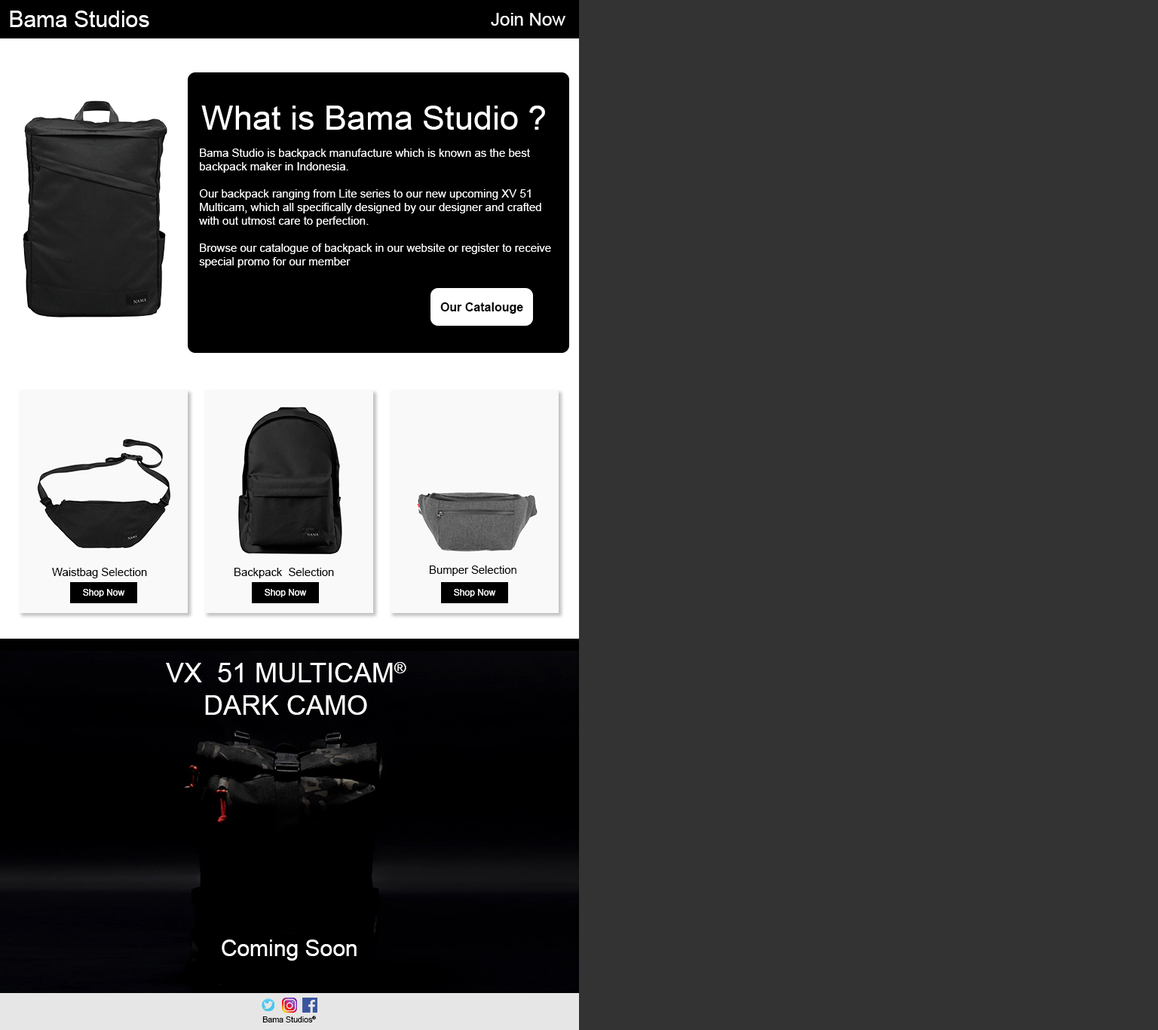
<style>
.page{position:relative;width:1158px;height:1030px;background:#333333}
.page>*{position:absolute;margin:0}
.t1{font:22.6px "ArialMT";color:#ffffff}
.t2{font:18.1px "ArialMT";color:#ffffff}
.t3{font:11.3px "ArialMT";color:#ffffff}
.t4{font:33.9px "ArialMT";color:#ffffff}
.t5{font:12.1px "Arial-BoldMT";color:#000000}
.t6{font:11.2px "ArialMT";color:#000000}
.t7{font:9px "ArialMT";color:#ffffff}
.t8{font:27.1px "ArialMT";color:#ffffff}
.t9{font:8px "ArialMT";color:#000000}
</style>
<div class="page">
<p class="t1" style="left:10px;top:11px;width:139px;height:16px">Bama Studios</p>
<p class="t2" style="left:491px;top:13px;width:74px;height:13px">Join Now</p>
<p class="t3" style="left:199px;top:106px;width:352px;height:162px"><span class="t4">What is Bama Studio ?<br></span><br>Bama Studio is backpack manufacture which is known as the best backpack maker in Indonesia.<br><br>Our backpack ranging from Lite series to our new upcoming XV 51 Multicam, which all specifically designed by our designer and crafted with out utmost care to perfection.<br><br>Browse our catalogue of backpack in our website or register to receive special promo for our member</p>
<p class="t5" style="left:440px;top:302px;width:83px;height:12px">Our Catalouge</p>
<p class="t6" style="left:52px;top:568px;width:95px;height:10px">Waistbag Selection</p>
<p class="t6" style="left:234px;top:568px;width:100px;height:10px">Backpack  Selection</p>
<p class="t6" style="left:430px;top:565px;width:86px;height:11px">Bumper Selection</p>
<p class="t7" style="left:83px;top:589px;width:42px;height:8px">Shop Now</p>
<p class="t7" style="left:265px;top:589px;width:42px;height:8px">Shop Now</p>
<p class="t7" style="left:454px;top:589px;width:42px;height:8px">Shop Now</p>
<p class="t8" style="left:166px;top:662px;width:240px;height:53px;text-align:center">VX  51 MULTICAM®<br>DARK CAMO</p>
<p class="t1" style="left:222px;top:939px;width:135px;height:21px">Coming Soon</p>
<p class="t9" style="left:262px;top:1015px;width:54px;height:7px">Bama Studios®</p>
</div>
